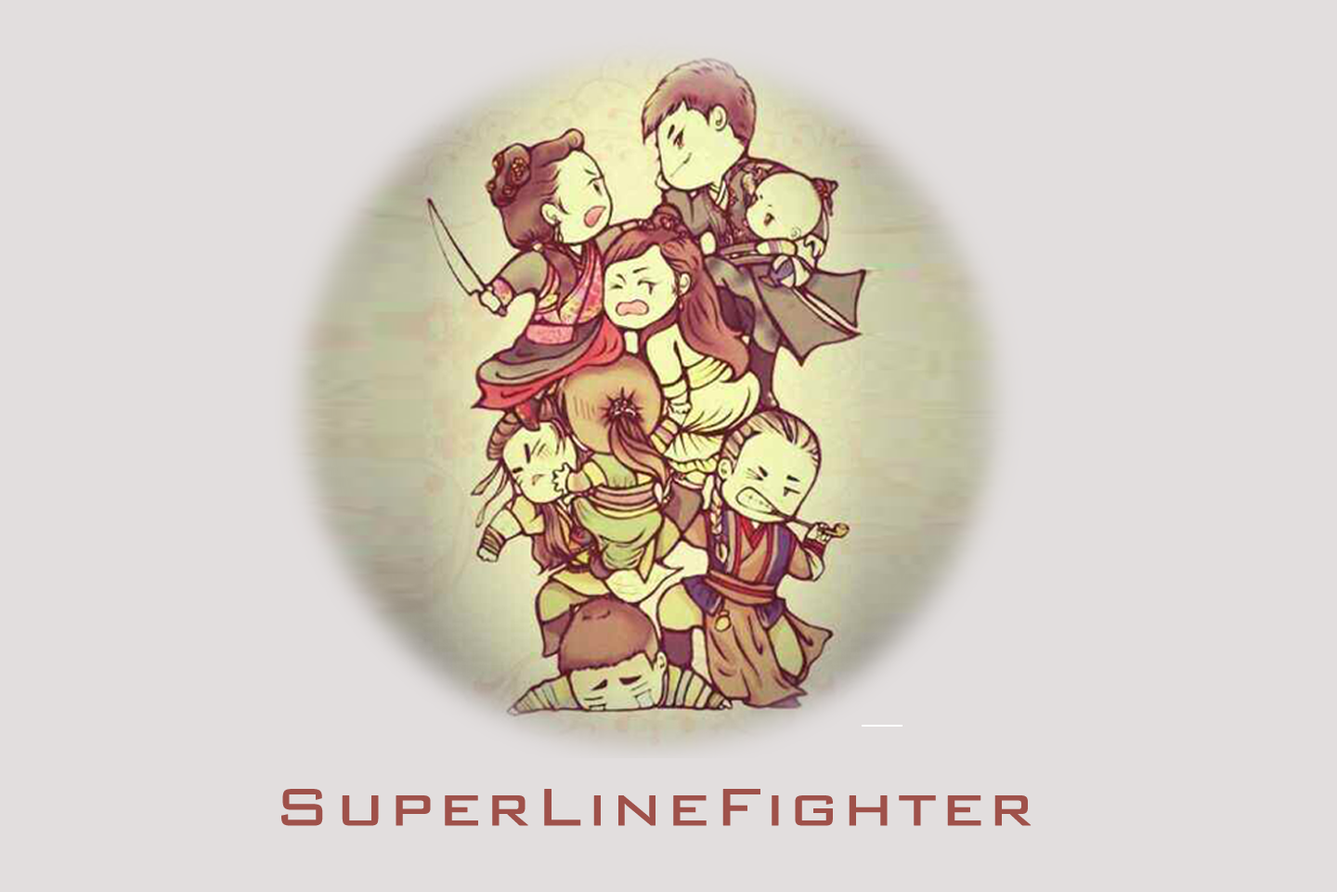
<style>
.page{position:relative;width:1337px;height:892px;background:#e2dede}
.page>*{position:absolute;margin:0}
.t1{font:69.7px "BankGothicBT-Light";letter-spacing:0.025em;color:#9f514a;font-weight:bold;scale:1.07 1}
</style>
<div class="page">
<p class="t1" style="left:281px;top:789px;width:751px;height:37px">SuperLineFighter</p>
</div>
